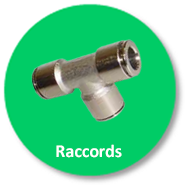
<style>
.page{position:relative;width:185px;height:185px;background:#00cc66}
.page>*{position:absolute;margin:0}
.t1{font:18px "Calibri-Bold";color:#ffffff}
</style>
<div class="page">
<p class="t1" style="left:56px;top:144px;width:66px;height:14px">Raccords</p>
</div>
